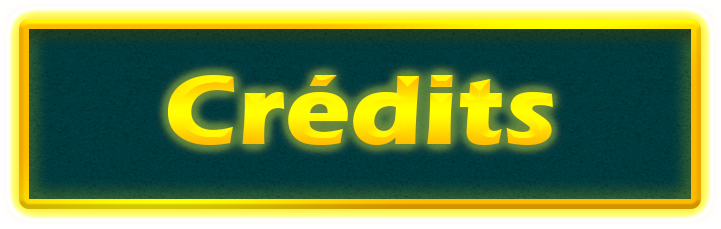
<style>
.page{position:relative;width:721px;height:229px}
.page>*{position:absolute;margin:0}
.t1{font:101.6px "ErasITC-Bold";color:#fffc00;scale:1.08 1}
</style>
<div class="page">
<p class="t1" style="left:167px;top:75px;width:386px;height:70px">Crédits</p>
</div>
